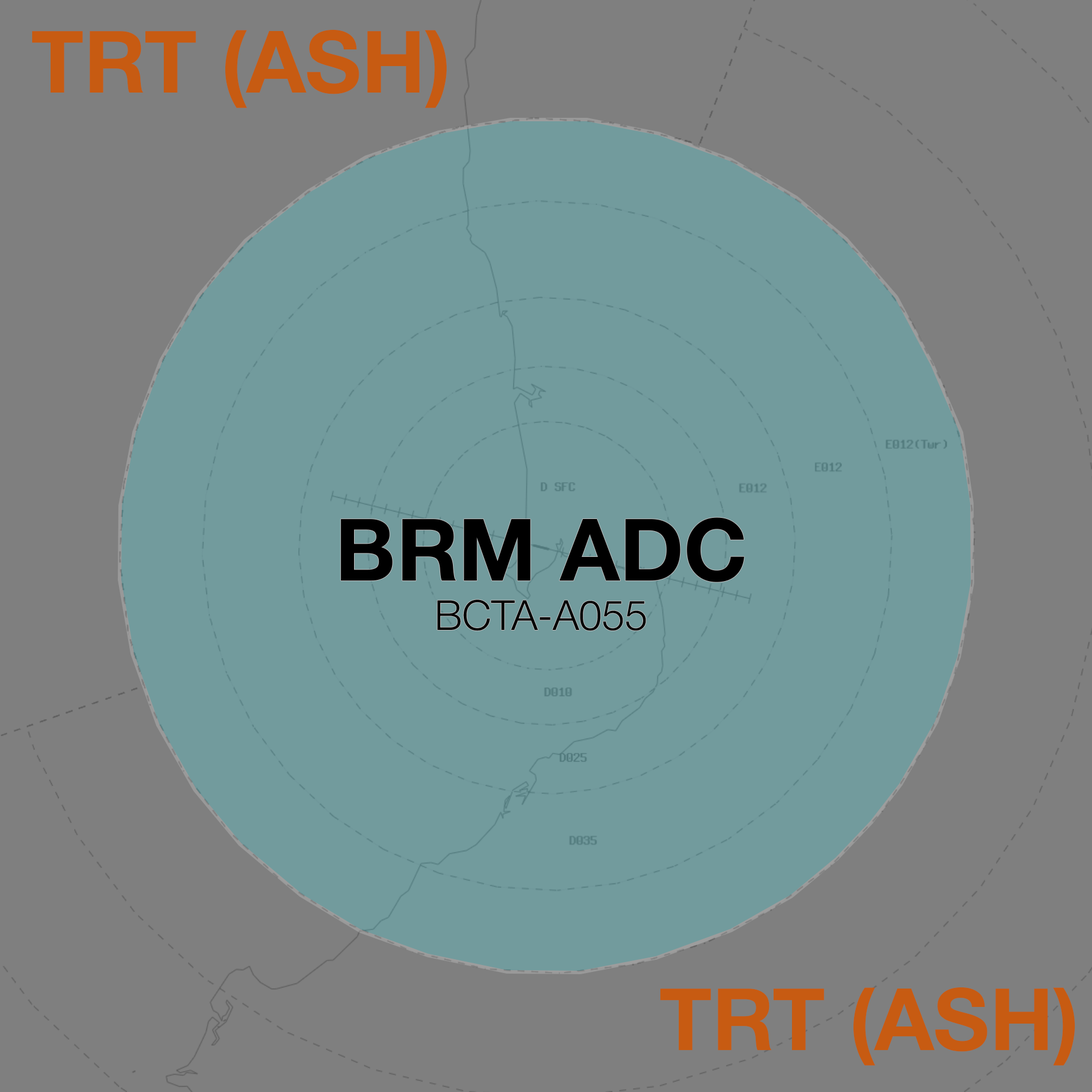
<style>
.page{position:relative;width:1092px;height:1092px;background:#7f7f7f}
.page>*{position:absolute;margin:0}
.t1{font:86.2px "HelveticaNeue-Bold";color:#c75b12}
.t2{font:41.4px "HelveticaNeue-Light";color:#000000}
.t3{font:86.2px "HelveticaNeue-Bold";color:#000000}
</style>
<div class="page">
<p class="t1" style="left:32px;top:29px;width:415px;height:79px">TRT (ASH)</p>
<p class="t2" style="left:341px;top:517px;width:403px;height:114px;text-align:center"><span class="t3">BRM ADC<br></span>BCTA-A055</p>
<p class="t1" style="left:660px;top:987px;width:415px;height:79px">TRT (ASH)</p>
</div>
